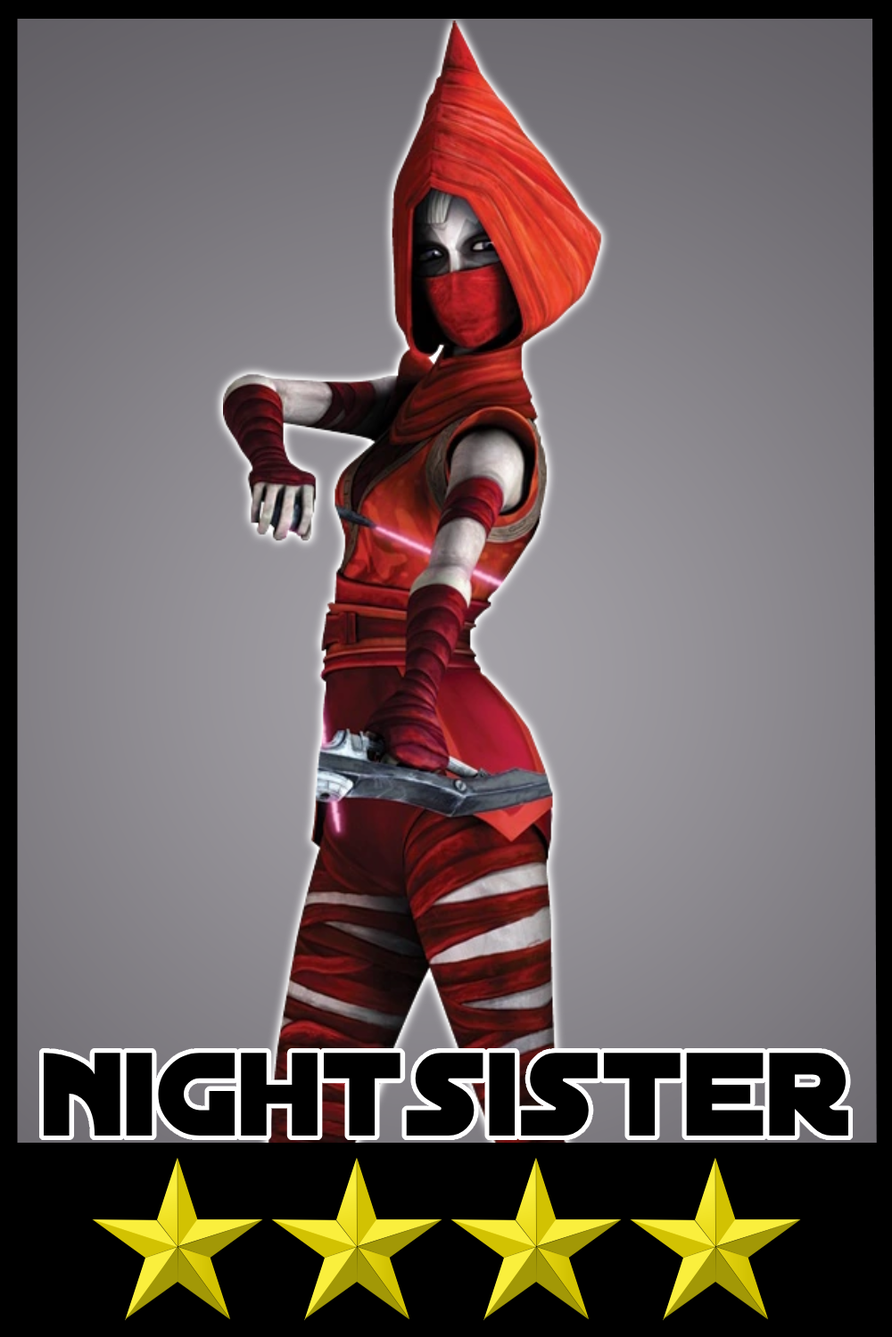
<style>
.page{position:relative;width:892px;height:1337px}
.page>*{position:absolute;margin:0}
.t1{font:127.2px "DistantGalaxy";color:#000000}
</style>
<div class="page">
<p class="t1" style="left:44px;top:1053px;width:804px;height:83px">nightsister</p>
</div>
